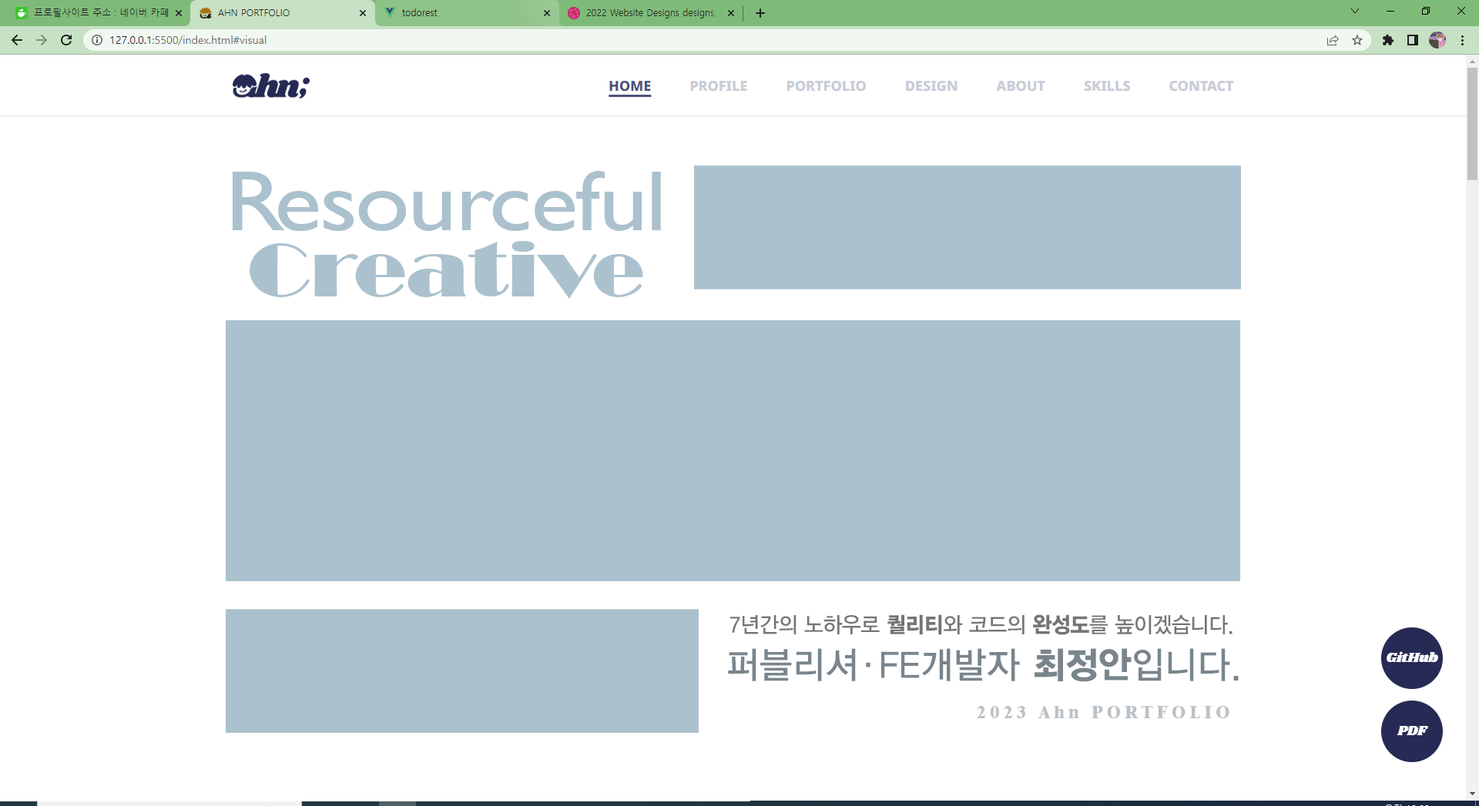
<style>
.page{position:relative;width:1479px;height:806px;background:#ffffff}
.page>*{position:absolute;margin:0}
.t1{font:86.4px "GillSansMT";letter-spacing:-0.02em;color:#abc1ce;scale:1.14 1}
.t2{font:86.4px "GillSansMT";letter-spacing:-0.1em;color:#abc1ce;scale:1.14 1}
.t3{font:77.6px "Broadway";color:#abc1ce;scale:1.14 1}
.t4{font:22px/35.8px "YDIYGO330";letter-spacing:-0.01em;color:#757575;scale:0.94 1}
.t5{font:22px/35.8px "YDIYGO360";letter-spacing:-0.01em;color:#757575;scale:0.94 1}
.t6{font:36.8px/44.9px "YDIYGO330";letter-spacing:0.013em;color:#79858c;scale:0.96 1}
.t7{font:36.8px/44.9px "YDIYGO330";letter-spacing:-0.207em;color:#79858c;scale:0.96 1}
.t8{font:36.8px/44.9px "YDIYGO360";letter-spacing:0.013em;color:#79858c;scale:0.96 1}
.t9{font:18.3px "Dutch801BT-ExtraBold";letter-spacing:0.23em;color:#bbc2c7;scale:0.94 1}
</style>
<div class="page">
<p class="t1" style="left:232px;top:171px;width:429px;height:60px"><span class="t2">R</span>esourceful</p>
<p class="t3" style="left:250px;top:241px;width:393px;height:58px">Creative</p>
<p class="t4" style="left:728px;top:615px;width:510px;height:67px;text-align:right">7년간의 노하우로 <span class="t5">퀄리티</span>와 코드의 <span class="t5">완성도</span>를 높이겠습니다. <br><span class="t6">퍼블리</span><span class="t7">셔·</span><span class="t6">FE개발자 </span><span class="t8">최정안</span><span class="t6">입니다.</span></p>
<p class="t9" style="left:977px;top:706px;width:252px;height:13px">2023 Ahn PORTFOLIO</p>
</div>
